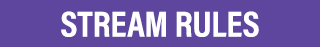
<style>
.page{position:relative;width:320px;height:47px;background:#5e469f}
.page>*{position:absolute;margin:0}
.t1{font:36.3px "AcuminProCond-Bold";color:#ffffff;text-transform:uppercase}
</style>
<div class="page">
<p class="t1" style="left:61px;top:11px;width:198px;height:26px">Stream Rules</p>
</div>
